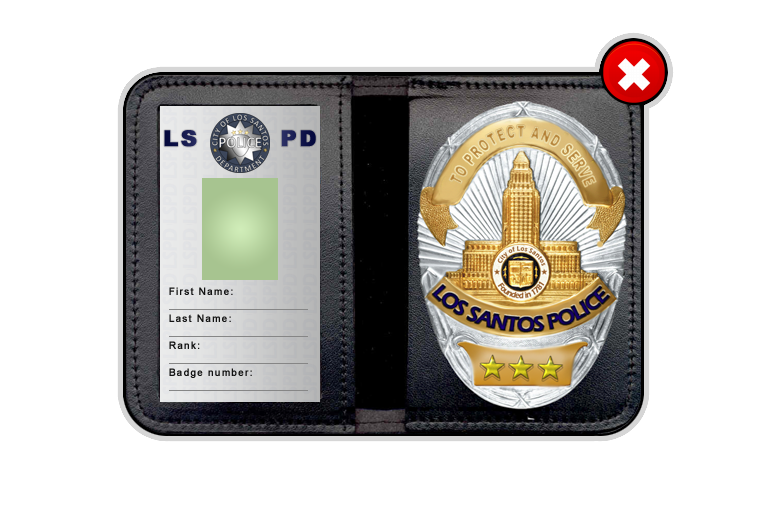
<style>
.page{position:relative;width:768px;height:512px;background:#ffffff}
.page>*{position:absolute;margin:0}
.t1{font:22px "Arial-Black";letter-spacing:0.1em;color:#151a4f;font-weight:bold}
.t2{font:10px "ArialMT";letter-spacing:0.1em;color:#131313;font-weight:bold}
</style>
<div class="page">
<p class="t1" style="left:164px;top:130px;width:152px;height:17px">LS        PD</p>
<p class="t2" style="left:169px;top:287px;width:64px;height:8px">First Name:</p>
<p class="t2" style="left:169px;top:314px;width:62px;height:8px">Last Name:</p>
<p class="t2" style="left:169px;top:341px;width:31px;height:8px">Rank:</p>
<p class="t2" style="left:169px;top:368px;width:83px;height:10px">Badge number:</p>
</div>
